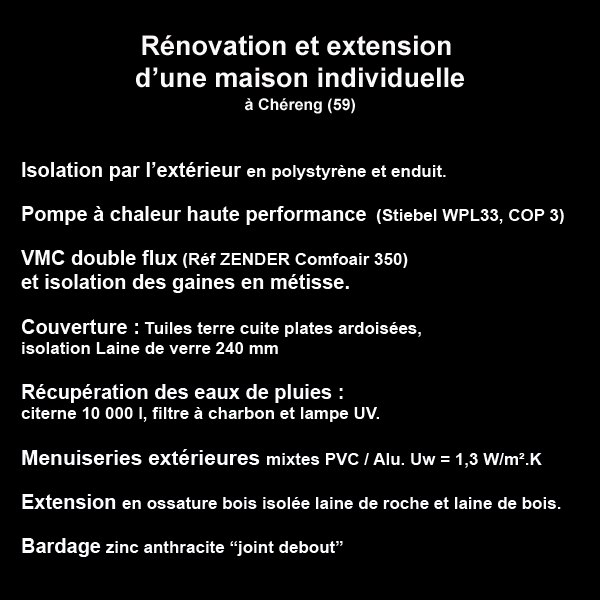
<style>
.page{position:relative;width:600px;height:600px;background:#000000}
.page>*{position:absolute;margin:0}
.t1{font:27px "Arial-BoldMT";color:#faf8f8}
.t2{font:16px/22.7px "Arial-BoldMT";color:#f9f9f9}
.t3{font:17px "Arial-BoldMT";color:#fdfcfc}
.t4{font:20px "Arial-BoldMT";color:#fdfcfc}
.t5{font:20px "Arial-BoldMT";color:#fafcfd}
.t6{font:17px "Arial-BoldMT";color:#fafcfd}
.t7{font:21px "Arial-BoldMT";color:#fafcfd}
</style>
<div class="page">
<p class="t1" style="left:136px;top:35px;width:328px;height:79px;text-align:center">Rénovation et extension <br>d’une maison individuelle<br><span class="t2">à Chéreng (59)</span></p>
<p class="t3" style="left:21px;top:162px;width:543px;height:395px"><span class="t4">Isolation par l’extérieur </span>en polystyrène et enduit.<br><br><span class="t4">Pompe à chaleur haute performance</span>  (Stiebel WPL33, COP 3)<br><br><span class="t4">VMC double flux</span> (Réf ZENDER Comfoair 350) <br><span class="t4">et isolation des gaines en métisse.<br><br>Couverture :</span> Tuiles terre cuite plates ardoisées, <br>isolation Laine de verre 240 mm<br><br><span class="t5">Récupération des eaux de pluies : <br></span><span class="t6">citerne 10 000 l, filtre à charbon et lampe UV.<br><br></span><span class="t7">Menuiseries extérieures </span><span class="t6">mixtes PVC / Alu. Uw = 1,3 W/m².K<br><br></span><span class="t5">Extension </span><span class="t6">en ossature bois isolée laine de roche et laine de bois. <br><br></span><span class="t5">Bardage</span><span class="t6"> zinc anthracite “joint debout”</span></p>
</div>
